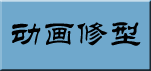
<style>
.page{position:relative;width:151px;height:71px;background:#6fa8cc}
.page>*{position:absolute;margin:0}
.t1{font:33.3px "STLiti";color:#000000}
</style>
<div class="page">
<p class="t1" style="left:11px;top:22px;width:130px;height:24px">动画修型</p>
</div>
